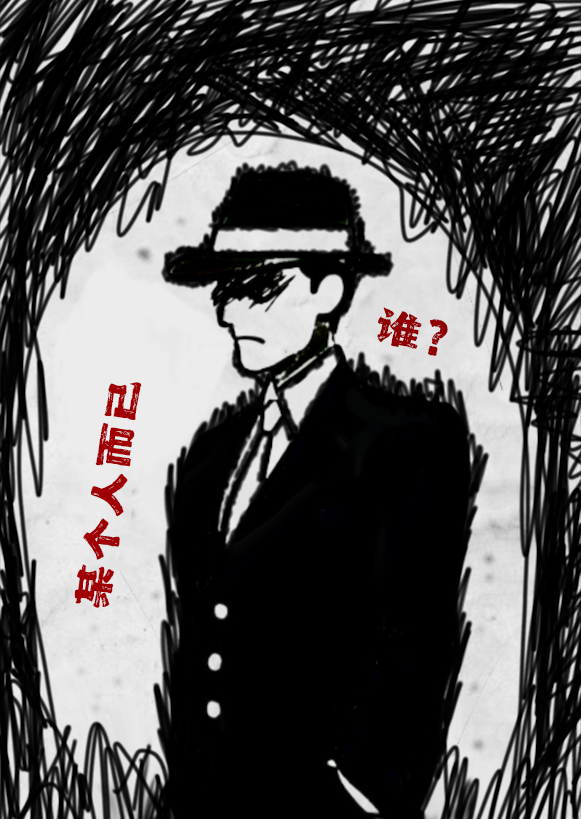
<style>
.page{position:relative;width:581px;height:819px;background:#000000}
.page>*{position:absolute;margin:0}
.t1{font:46.6px "zihunbanshuahei_T";color:#900002}
.t2{font:47.5px "zihunbanshuahei_T";color:#a00003}
</style>
<div class="page">
<p class="t1" style="left:377px;top:307px;width:71px;height:49px;rotate:13deg">谁？</p>
<p class="t2" style="left:74px;top:382px;width:68px;height:226px;rotate:-81deg">某个人而已</p>
</div>
